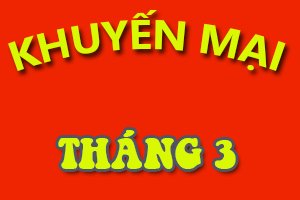
<style>
.page{position:relative;width:300px;height:200px;background:#ee2500}
.page>*{position:absolute;margin:0}
.t1{font:40px "SegoeUI-Bold";color:#d8f803}
.t2{font:40px "VNI-Truck";color:#d8f803}
</style>
<div class="page">
<p class="t1" style="left:8px;top:9px;width:278px;height:62px">KHUYẾN MẠI</p>
<p class="t2" style="left:58px;top:130px;width:178px;height:39px">THAÙNG 3</p>
</div>
